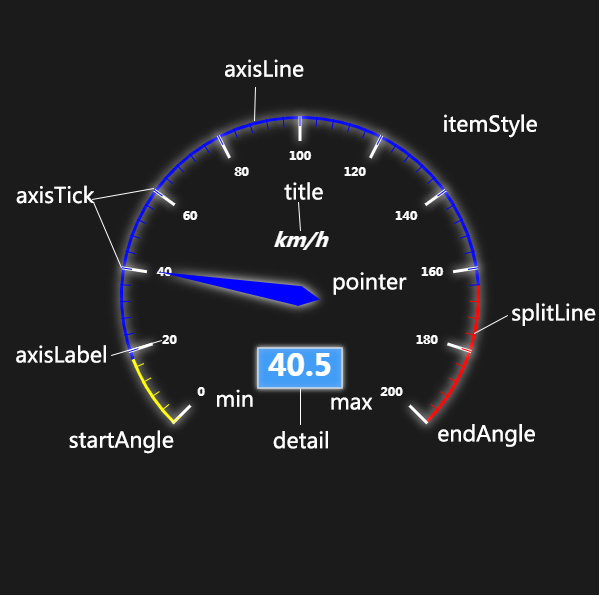
<style>
.page{position:relative;width:599px;height:595px;background:#1b1b1b}
.page>*{position:absolute;margin:0}
.t1{font:21.3px "MicrosoftYaHei";color:#ffffff}
</style>
<div class="page">
<p class="t1" style="left:225px;top:59px;width:79px;height:18px">axisLine</p>
<p class="t1" style="left:444px;top:114px;width:93px;height:24px">itemStyle</p>
<p class="t1" style="left:16px;top:185px;width:79px;height:19px">axisTick</p>
<p class="t1" style="left:284px;top:182px;width:39px;height:18px">title</p>
<p class="t1" style="left:333px;top:272px;width:74px;height:23px">pointer</p>
<p class="t1" style="left:512px;top:303px;width:84px;height:23px">splitLine</p>
<p class="t1" style="left:16px;top:345px;width:90px;height:18px">axisLabel</p>
<p class="t1" style="left:217px;top:389px;width:36px;height:18px">min</p>
<p class="t1" style="left:331px;top:397px;width:42px;height:13px">max</p>
<p class="t1" style="left:438px;top:424px;width:97px;height:23px">endAngle</p>
<p class="t1" style="left:69px;top:430px;width:105px;height:24px">startAngle</p>
<p class="t1" style="left:273px;top:431px;width:55px;height:18px">detail</p>
</div>
